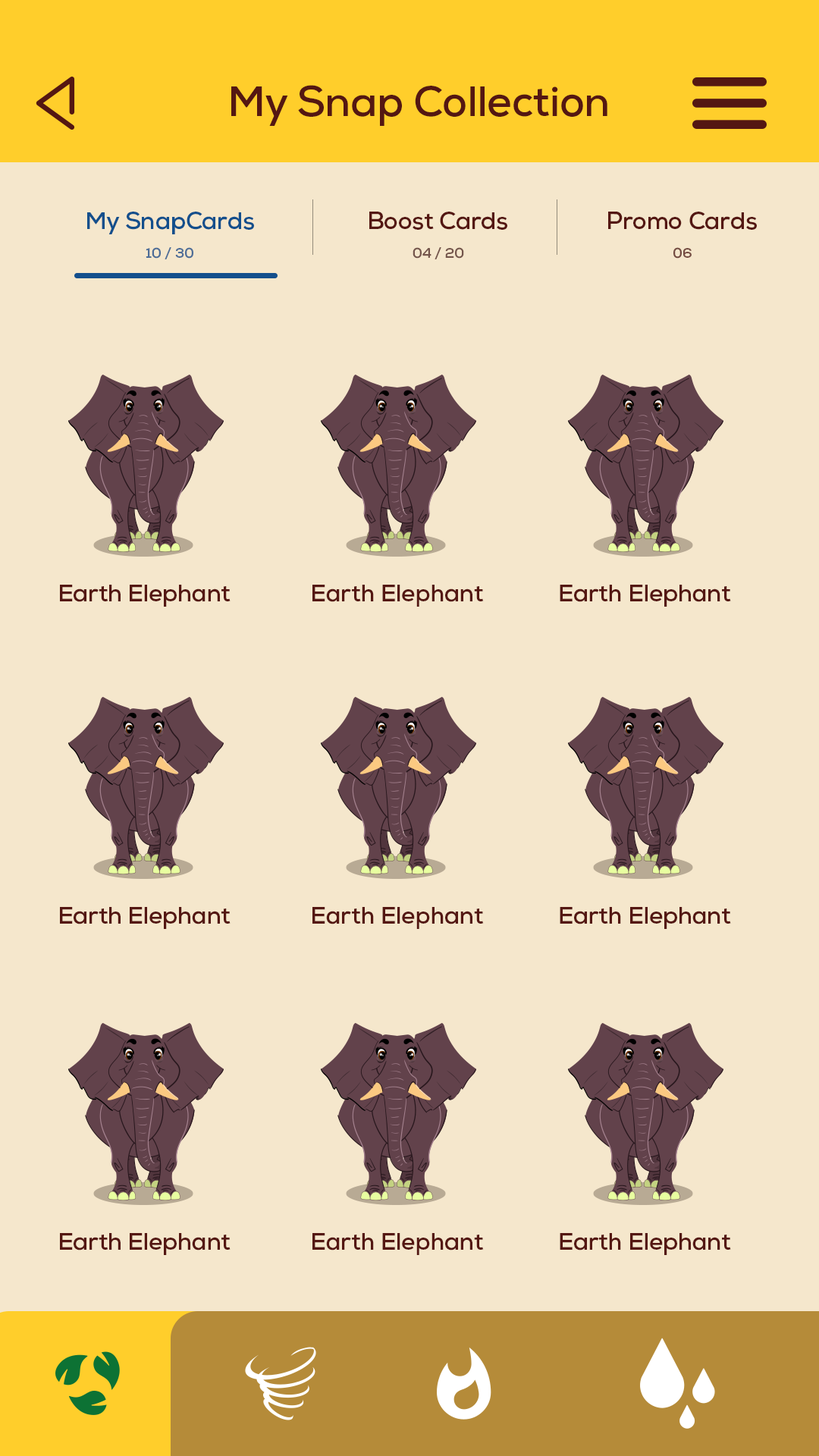
<style>
.page{position:relative;width:819px;height:1456px;background:#f5e7cc}
.page>*{position:absolute;margin:0}
.t1{font:42.5px "Nexa-Bold";letter-spacing:-0.01em;color:#541712}
.t2{font:24.3px "Nexa-Bold";letter-spacing:-0.01em;color:#134f8c}
.t3{font:24.3px "Nexa-Bold";letter-spacing:-0.01em;color:#541712}
.t4{font:14.2px "Nexa-Bold";letter-spacing:-0.01em;color:#4d6d97}
.t5{font:14.2px "Nexa-Bold";letter-spacing:-0.01em;color:#74554b}
.t6{font:14.2px "Nexa-Bold";letter-spacing:-0.01em;color:#744b41}
.t7{font:23.9px "Nexa-Bold";letter-spacing:-0.01em;color:#541712}
</style>
<div class="page">
<p class="t1" style="left:231px;top:85px;width:376px;height:41px">My Snap Collection</p>
<p class="t2" style="left:87px;top:212px;width:167px;height:22px">My SnapCards</p>
<p class="t3" style="left:369px;top:212px;width:138px;height:18px">Boost Cards</p>
<p class="t3" style="left:608px;top:212px;width:149px;height:18px">Promo Cards</p>
<p class="t4" style="left:146px;top:247px;width:47px;height:12px">10 / 30</p>
<p class="t5" style="left:413px;top:247px;width:51px;height:12px">04 / 20</p>
<p class="t6" style="left:673px;top:247px;width:19px;height:12px">06</p>
<p class="t7" style="left:60px;top:585px;width:171px;height:22px">Earth Elephant</p>
<p class="t7" style="left:312px;top:585px;width:172px;height:22px">Earth Elephant</p>
<p class="t7" style="left:560px;top:585px;width:171px;height:22px">Earth Elephant</p>
<p class="t7" style="left:60px;top:907px;width:171px;height:22px">Earth Elephant</p>
<p class="t7" style="left:312px;top:907px;width:172px;height:22px">Earth Elephant</p>
<p class="t7" style="left:560px;top:907px;width:171px;height:22px">Earth Elephant</p>
<p class="t7" style="left:60px;top:1233px;width:171px;height:22px">Earth Elephant</p>
<p class="t7" style="left:312px;top:1233px;width:172px;height:22px">Earth Elephant</p>
<p class="t7" style="left:560px;top:1233px;width:171px;height:22px">Earth Elephant</p>
</div>
